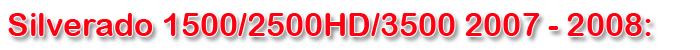
<style>
.page{position:relative;width:700px;height:50px;background:#ffffff}
.page>*{position:absolute;margin:0}
.t1{font:32px "ArialRoundedMTBold";color:#fd0011}
</style>
<div class="page">
<p class="t1" style="left:8px;top:13px;width:643px;height:23px">Silverado 1500/2500HD/3500 2007 - 2008:</p>
</div>
